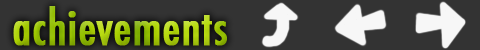
<style>
.page{position:relative;width:480px;height:50px;background:#333333}
.page>*{position:absolute;margin:0}
.t1{font:47px "Futura-CondensedMedium";font-weight:bold}
</style>
<div class="page">
<p class="t1" style="left:13px;top:6px;width:214px;height:40px">achievements</p>
</div>
